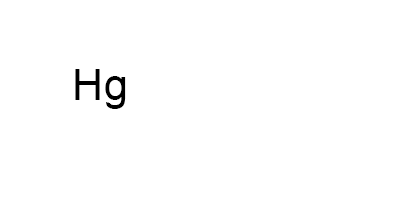
<style>
.page{position:relative;width:400px;height:200px;background:#ffffff}
.page>*{position:absolute;margin:0}
.t1{font:43.2px "ArialMT";color:#000000}
</style>
<div class="page">
<p class="t1" style="left:75px;top:69px;width:51px;height:40px">Hg</p>
</div>
